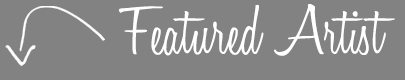
<style>
.page{position:relative;width:405px;height:80px;background:#828282}
.page>*{position:absolute;margin:0}
.t1{font:72px "HoneyScript-Light";color:#ffffff}
</style>
<div class="page">
<p class="t1" style="left:118px;top:4px;width:277px;height:52px">Featured Artist</p>
</div>
